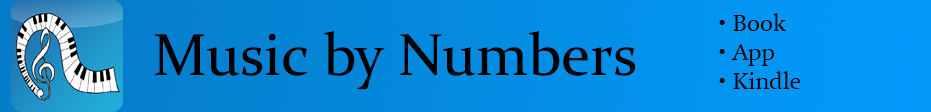
<style>
.page{position:relative;width:931px;height:112px}
.page>*{position:absolute;margin:0}
.t1{font:24px "Constantia";color:#000000}
.t2{font:59.9px "Constantia";color:#000000}
</style>
<div class="page">
<p class="t1" style="left:719px;top:13px;width:82px;height:76px">• Book<br>• App<br>• Kindle</p>
<p class="t2" style="left:155px;top:31px;width:481px;height:59px">Music by Numbers</p>
</div>
